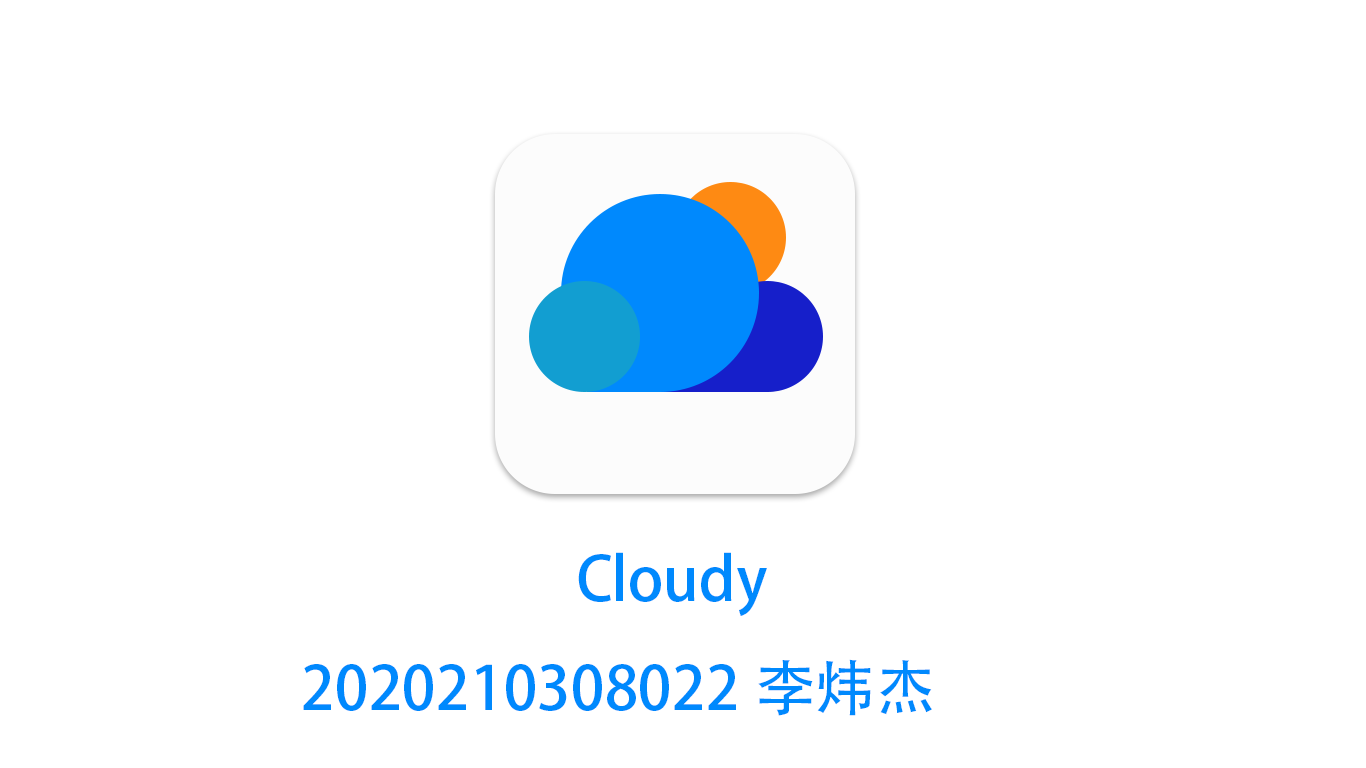
<style>
.page{position:relative;width:1366px;height:768px;background:#ffffff}
.page>*{position:absolute;margin:0}
.t1{font:60px "AdobeHeitiStd-Regular";color:#0089fd}
</style>
<div class="page">
<p class="t1" style="left:578px;top:552px;width:189px;height:64px">Cloudy</p>
<p class="t1" style="left:303px;top:659px;width:629px;height:57px">2020210308022李炜杰<br>杰杰</p>
</div>
